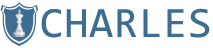
<style>
.page{position:relative;width:213px;height:48px;background:#ffffff}
.page>*{position:absolute;margin:0}
.t1{font:43.3px "Consolas";letter-spacing:0.025em;color:#3e6d92}
</style>
<div class="page">
<p class="t1" style="left:41px;top:8px;width:169px;height:30px">CHARLES</p>
</div>
